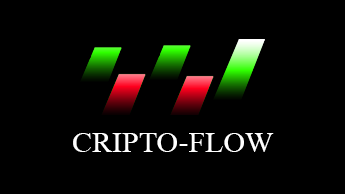
<style>
.page{position:relative;width:345px;height:194px;background:#000000}
.page>*{position:absolute;margin:0}
.t1{font:30px "MongolianBaiti";color:#ffffff}
</style>
<div class="page">
<p class="t1" style="left:73px;top:133px;width:201px;height:19px">CRIPTO-FLOW</p>
</div>
